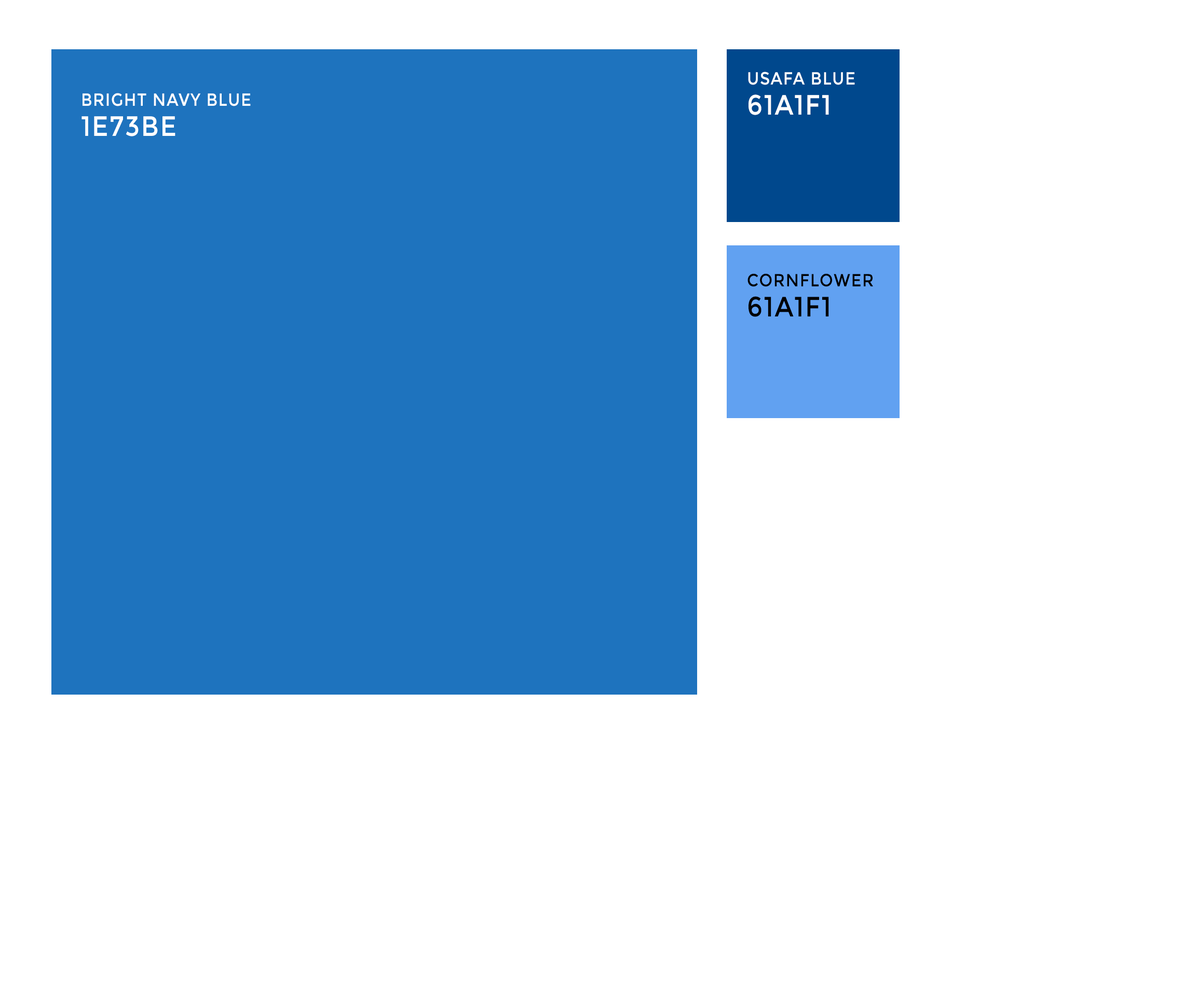
<style>
.page{position:relative;width:1197px;height:996px;background:#ffffff}
.page>*{position:absolute;margin:0}
.t1{font:17.6px "Montserrat-Regular";letter-spacing:0.05em;color:#ffffff;text-transform:uppercase;scale:0.9 1}
.t2{font:28px "Montserrat-Regular";letter-spacing:0.05em;color:#ffffff;text-transform:uppercase;scale:0.9 1}
.t3{font:17.6px "Montserrat-Regular";letter-spacing:0.05em;color:#000000;text-transform:uppercase;scale:0.9 1}
.t4{font:28px "Montserrat-Regular";letter-spacing:0.05em;color:#000000;text-transform:uppercase;scale:0.9 1}
</style>
<div class="page">
<p class="t1" style="left:748px;top:72px;width:107px;height:13px">USAFA BLUE</p>
<p class="t1" style="left:83px;top:93px;width:168px;height:13px">Bright navy blue</p>
<p class="t2" style="left:748px;top:94px;width:81px;height:21px">61a1f1</p>
<p class="t2" style="left:81px;top:116px;width:94px;height:20px">1e73be</p>
<p class="t3" style="left:747px;top:273px;width:126px;height:14px">Cornflower</p>
<p class="t4" style="left:748px;top:296px;width:81px;height:21px">61a1f1</p>
</div>
